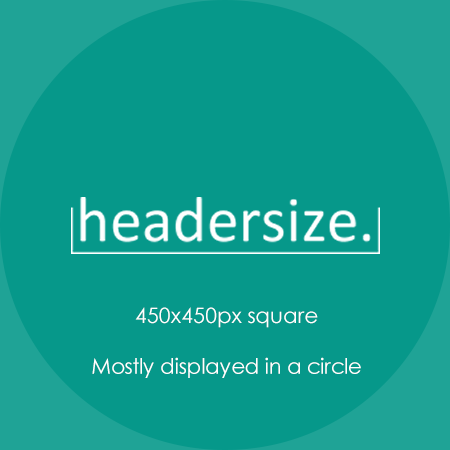
<style>
.page{position:relative;width:450px;height:450px;background:#06988a}
.page>*{position:absolute;margin:0}
.t1{font:21.2px/25.4px "CenturyGothic";color:#ffffff}
</style>
<div class="page">
<p class="t1" style="left:92px;top:307px;width:269px;height:71px;text-align:center">450x450px square<br><br>Mostly displayed in a circle</p>
</div>
